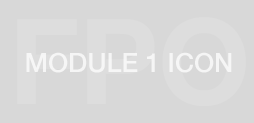
<style>
.page{position:relative;width:254px;height:123px;background:#d8d8d8}
.page>*{position:absolute;margin:0}
.t1{font:118.4px "HelveticaNeue-Bold";color:#dddddd}
.t2{font:26.4px "HelveticaNeue-Medium";color:#ffffff}
</style>
<div class="page">
<p class="t1" style="left:17px;top:17px;width:229px;height:89px">FPO</p>
<p class="t2" style="left:26px;top:52px;width:206px;height:21px">MODULE 1 ICON</p>
</div>
